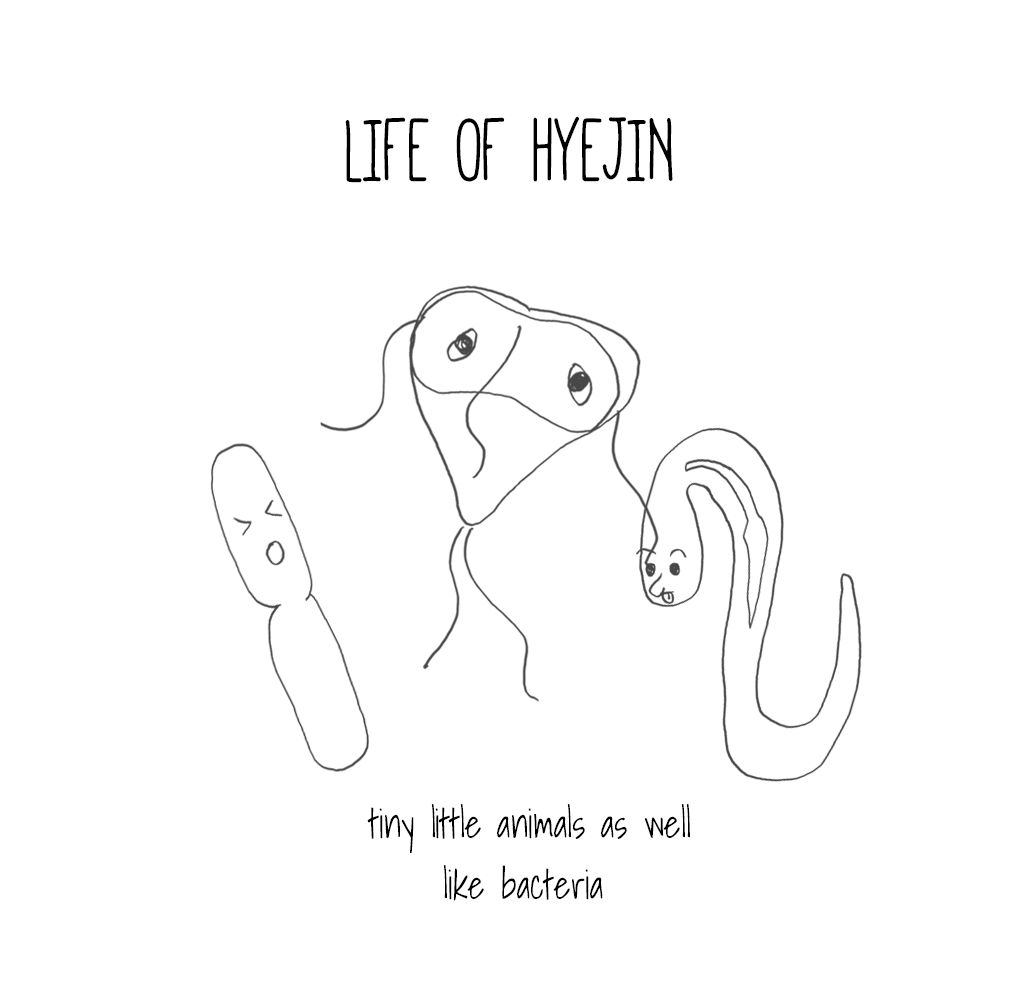
<style>
.page{position:relative;width:1024px;height:1000px;background:#ffffff}
.page>*{position:absolute;margin:0}
.t1{font:100px "Mathlete-Bulky";color:#000000;scale:0.9 1}
.t2{font:40px "ShadowsIntoLight";color:#000000;scale:0.9 1}
</style>
<div class="page">
<p class="t1" style="left:345px;top:116px;width:328px;height:67px">LIFE OF HYEJIN</p>
<p class="t2" style="left:367px;top:804px;width:323px;height:49px">tiny little animals as well</p>
<p class="t2" style="left:443px;top:865px;width:160px;height:36px">like bacteria</p>
</div>
